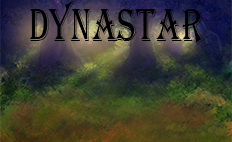
<style>
.page{position:relative;width:232px;height:142px}
.page>*{position:absolute;margin:0}
.t1{font:48.2px "Algerian";color:#000000;scale:0.71 1}
</style>
<div class="page">
<p class="t1" style="left:29px;top:1px;width:176px;height:44px">Dynastar</p>
</div>
